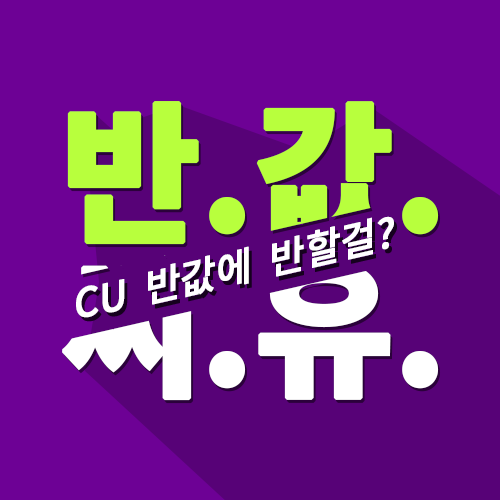
<style>
.page{position:relative;width:500px;height:500px;background:#6d0195}
.page>*{position:absolute;margin:0}
.t1{font:150px/154px "NotoSansKR-Black";letter-spacing:-0.02em;color:#b8ff3d;font-weight:bold}
.t2{font:150px/154px "NotoSansKR-Black";letter-spacing:-0.02em;color:#ffffff;font-weight:bold}
.t3{font:40px "NotoSansKR-Medium";letter-spacing:-0.02em;color:#ffffff;font-weight:bold}
</style>
<div class="page">
<p class="t1" style="left:62px;top:101px;width:377px;height:300px">반.값.<br><span class="t2">씨.유.</span></p>
<p class="t3" style="left:76px;top:216px;width:318px;height:102px;rotate:-13deg">CU  반값에  반할걸?</p>
</div>
